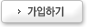
<style>
.page{position:relative;width:87px;height:27px;background:#ffffff}
.page>*{position:absolute;margin:0}
.t1{font:11px "RixGoB";letter-spacing:-0.025em;color:#4e4e4e;scale:0.95 1}
</style>
<div class="page">
<p class="t1" style="left:27px;top:6px;width:37px;height:11px">가입하기</p>
</div>
